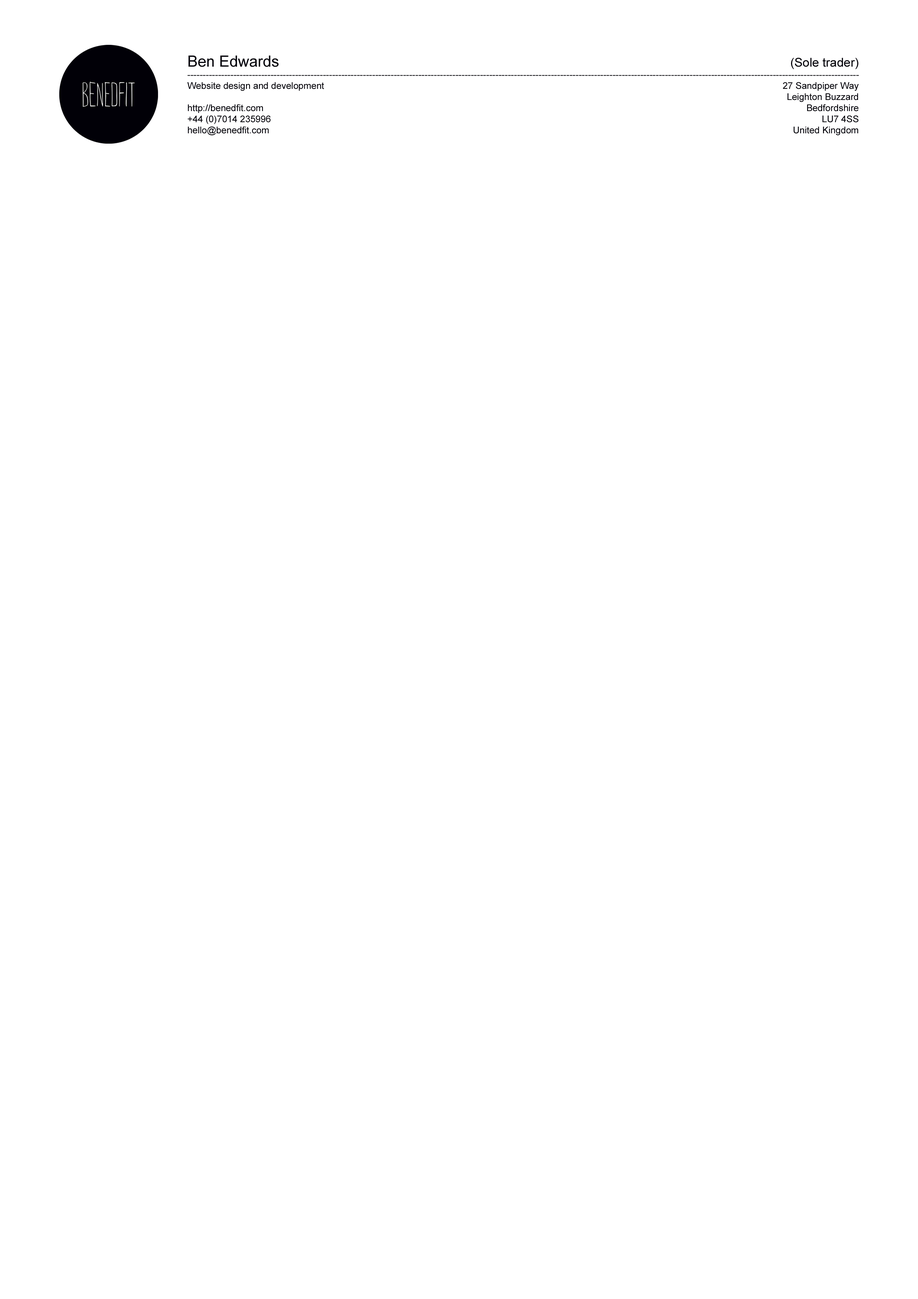
<style>
.page{position:relative;width:918px;height:1299px;background:#ffffff}
.page>*{position:absolute;margin:0}
.t1{font:9.3px "ArialMT";color:#010007}
.t2{font:15.4px "ArialMT";color:#010007}
.t3{font:12.3px "ArialMT";color:#010007}
</style>
<div class="page">
<p class="t1" style="left:187px;top:56px;width:672px;height:80px"><span class="t2">Ben Edwards</span><br>--------------------------------------------------------------------------------------------------------------------------------------------------------------------------------------------------------------------------<br>Website design and development<br><br>http://benedfit.com<br>+44 (0)7014 235996<br>hello@benedfit.com</p>
<p class="t1" style="left:783px;top:58px;width:76px;height:78px;text-align:right"><span class="t3">(Sole trader)<br></span><br>27 Sandpiper Way<br>Leighton Buzzard<br>Bedfordshire<br>LU7 4SS<br>United Kingdom</p>
</div>
